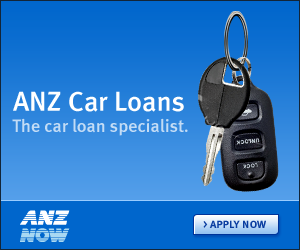
<style>
.page{position:relative;width:300px;height:250px}
.page>*{position:absolute;margin:0}
.t1{font:28px "MetaMediumLF-Roman";color:#ffffff}
.t2{font:18px "MetaMediumLF-Roman";color:#c2dcf5}
.t3{font:11px "MetaBoldLF-Roman";letter-spacing:0.035em;color:#0a3da0}
.t4{font:12px "MetaMedium-Roman";color:#0a3da0}
</style>
<div class="page">
<p class="t1" style="left:13px;top:91px;width:171px;height:21px">ANZ Car Loans</p>
<p class="t2" style="left:12px;top:118px;width:176px;height:18px">The car loan specialist.</p>
<p class="t3" style="left:203px;top:220px;width:63px;height:8px"><span class="t4">&gt; </span>APPLY NOW</p>
</div>
